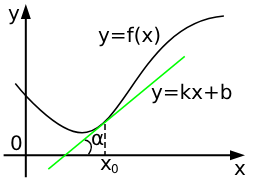
<style>
.page{position:relative;width:254px;height:181px;background:#ffffff}
.page>*{position:absolute;margin:0}
.t1{font:20px "DejaVuSans";color:#000000}
.t2{font:12px "DejaVuSans";color:#000000}
</style>
<div class="page">
<p class="t1" style="left:8px;top:9px;width:12px;height:16px">y</p>
<p class="t1" style="left:98px;top:26px;width:62px;height:21px">y=f(x)</p>
<p class="t1" style="left:151px;top:83px;width:81px;height:21px">y=kx+b</p>
<p class="t1" style="left:11px;top:135px;width:11px;height:16px">0</p>
<p class="t1" style="left:92px;top:133px;width:12px;height:13px">α</p>
<p class="t1" style="left:100px;top:159px;width:12px;height:11px">x</p>
<p class="t2" style="left:111px;top:164px;width:7px;height:10px">0</p>
<p class="t1" style="left:234px;top:164px;width:12px;height:11px">x</p>
</div>
